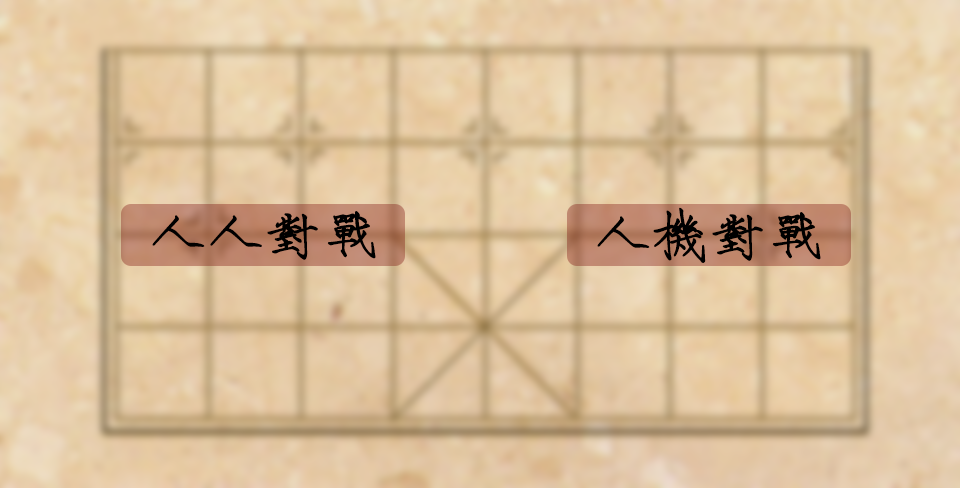
<style>
.page{position:relative;width:960px;height:488px}
.page>*{position:absolute;margin:0}
.t1{font:56.3px "HYi3gf";color:#000000;font-weight:bold}
</style>
<div class="page">
<p class="t1" style="left:597px;top:207px;width:224px;height:56px">人机对战</p>
<p class="t1" style="left:152px;top:211px;width:224px;height:49px">人人对战</p>
</div>
